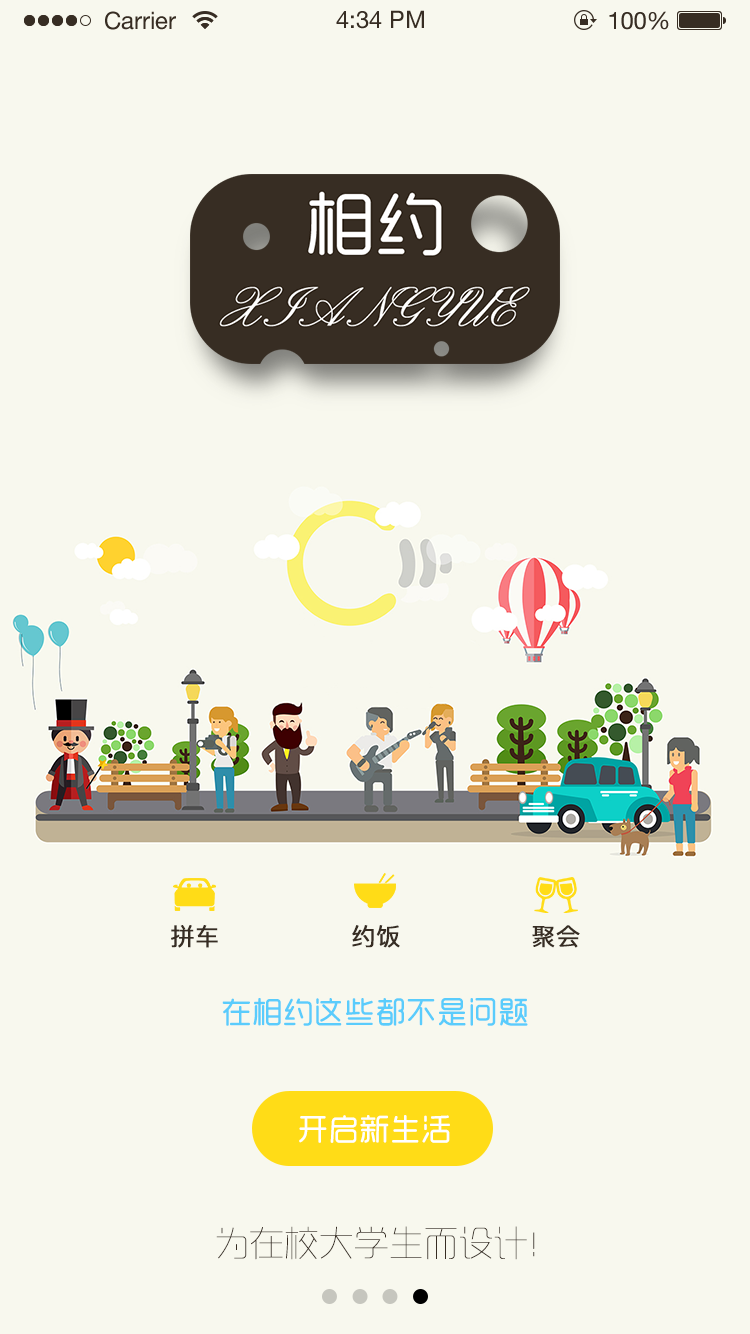
<style>
.page{position:relative;width:750px;height:1334px;background:#f8f8ee}
.page>*{position:absolute;margin:0}
.t1{font:24px "PingFangSC-Regular";color:#372d23;font-weight:bold}
.t2{font:30px "MFYueYuan_Noncommercial-Regular";color:#5accfc;font-weight:bold}
.t3{font:30px "MFYueYuan_Noncommercial-Regular";color:#ffffff;font-weight:bold}
.t4{font:34px "RTWSYueGoTrial-UltLight";color:#372d23;font-weight:bold}
</style>
<div class="page">
<p class="t1" style="left:171px;top:925px;width:47px;height:23px">拼车</p>
<p class="t1" style="left:352px;top:925px;width:48px;height:23px">约饭</p>
<p class="t1" style="left:532px;top:925px;width:48px;height:23px">聚会</p>
<p class="t2" style="left:222px;top:998px;width:306px;height:28px">在相约这些都不是问题</p>
<p class="t3" style="left:299px;top:1115px;width:151px;height:28px">开启新生活</p>
<p class="t4" style="left:216px;top:1226px;width:319px;height:34px">为在校大学生而设计！</p>
</div>
